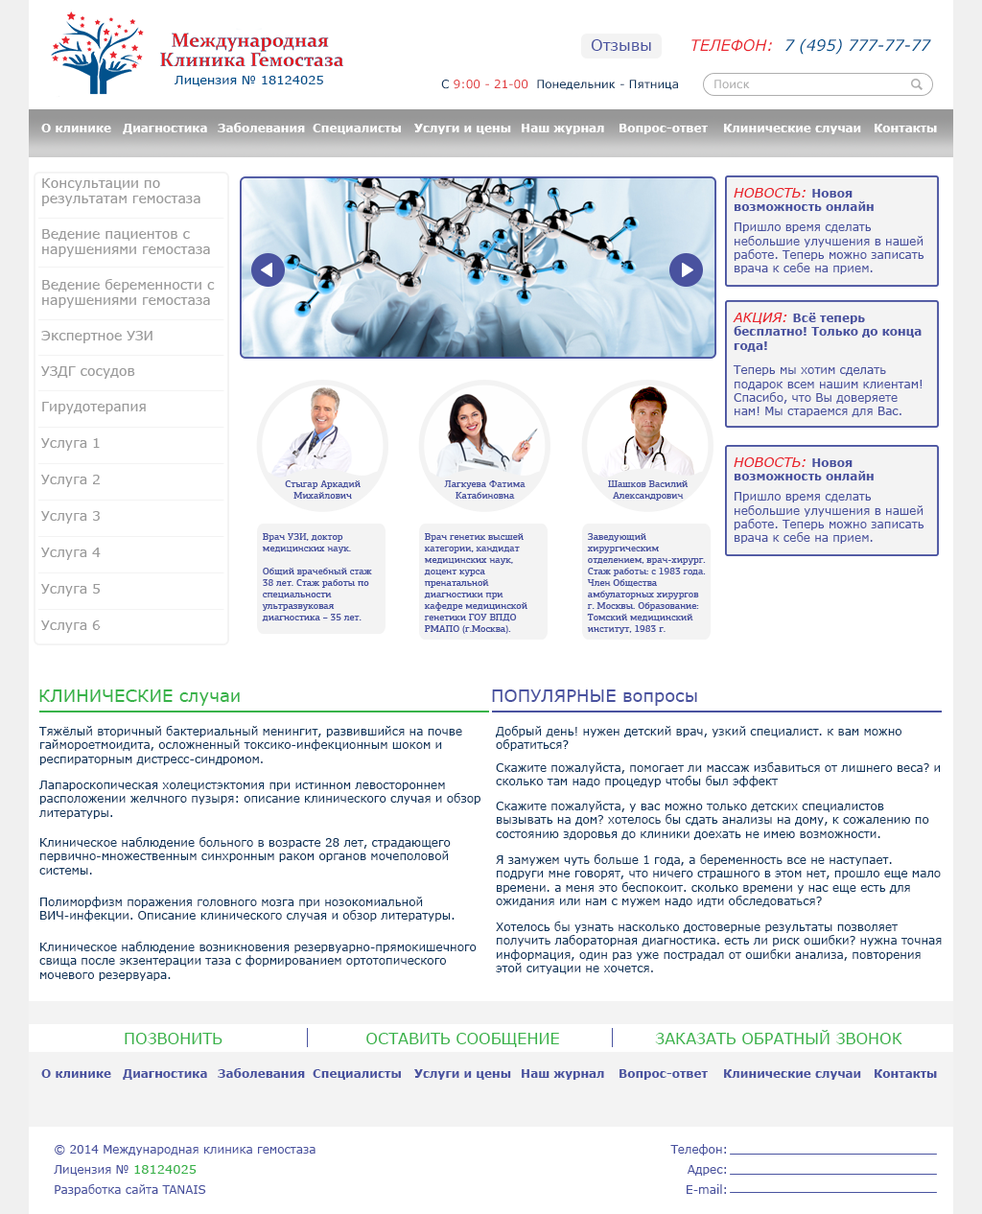
<style>
.page{position:relative;width:982px;height:1214px;background:#ffffff}
.page>*{position:absolute;margin:0}
.t1{font:15.3px "Verdana";color:#49529f}
.t2{font:15.3px "Verdana-Italic";color:#01518c}
.t3{font:15.3px "Verdana-Italic";color:#e9232c;text-transform:uppercase}
.t4{font:12.5px "Verdana";color:#01518c}
.t5{font:11.5px "Verdana";color:#10365d}
.t6{font:11.5px "Verdana";color:#e13b3e}
.t7{font:11.5px "Verdana";color:#aeaeae}
.t8{font:11.5px "Verdana-Bold";color:#ffffff}
.t9{font:13.4px "Verdana";color:#9a9a9a}
.t10{font:11.5px "Verdana-Bold";color:#49529f}
.t11{font:13.4px "Verdana-Italic";color:#e9232c;text-transform:uppercase}
.t12{font:13.4px "Verdana-Bold";color:#49529f}
.t13{font:11.5px "Verdana";color:#49529f}
.t14{font:9.6px "PFAgoraSlabPro-Medium";color:#4953a0}
.t15{font:17.3px "Verdana";color:#38b349;text-transform:uppercase}
.t16{font:17.3px "Verdana";color:#38b349}
.t17{font:17.3px "Verdana";color:#49529f;text-transform:uppercase}
.t18{font:17.3px "Verdana";color:#49529f}
.t19{font:15.3px "Verdana";color:#38b349;text-transform:uppercase}
.t20{font:11.5px/20.1px "Verdana";color:#49529f}
.t21{font:12.5px "Verdana";color:#38b349}
</style>
<div class="page">
<p class="t1" style="left:591px;top:39px;width:60px;height:12px">Отзывы</p>
<p class="t2" style="left:691px;top:38px;width:240px;height:17px"><span class="t3">Телефон: </span> 7 (495) 777-77-77</p>
<p class="t4" style="left:175px;top:76px;width:148px;height:10px">Лицензия № 18124025</p>
<p class="t5" style="left:441px;top:80px;width:237px;height:10px">C <span class="t6">9:00 - 21-00  </span>Понедельник - Пятница</p>
<p class="t7" style="left:715px;top:80px;width:35px;height:9px">Поиск</p>
<p class="t8" style="left:41px;top:124px;width:70px;height:8px">О клинике</p>
<p class="t8" style="left:123px;top:124px;width:84px;height:10px">Диагностика</p>
<p class="t8" style="left:218px;top:123px;width:87px;height:9px">Заболевания</p>
<p class="t8" style="left:313px;top:124px;width:88px;height:10px">Специалисты</p>
<p class="t8" style="left:414px;top:124px;width:97px;height:10px">Услуги и цены</p>
<p class="t8" style="left:522px;top:124px;width:82px;height:10px">Наш журнал</p>
<p class="t8" style="left:620px;top:124px;width:88px;height:10px">Вопрос-ответ</p>
<p class="t8" style="left:724px;top:124px;width:137px;height:10px">Клинические случаи</p>
<p class="t8" style="left:875px;top:124px;width:62px;height:8px">Контакты</p>
<p class="t9" style="left:42px;top:178px;width:158px;height:28px">Консультации по <br>результатам гемостаза</p>
<p class="t10" style="left:734px;top:188px;width:140px;height:23px"><span class="t11">Новость: </span>Новоя возможность онлайн <span class="t12">записи на прием</span></p>
<p class="t9" style="left:42px;top:229px;width:168px;height:28px">Ведение пациентов с <br>нарушениями гемостаза</p>
<p class="t13" style="left:734px;top:223px;width:191px;height:51px">Пришло время сделать небольшие улучшения в нашей работе. Теперь можно записать врача к себе на прием.</p>
<p class="t9" style="left:42px;top:279px;width:173px;height:29px">Ведение беременности с <br>нарушениями гемостаза</p>
<p class="t10" style="left:733px;top:313px;width:189px;height:39px"><span class="t11">Акция: </span>Всё теперь бесплатно! Только до конца года!</p>
<p class="t9" style="left:41px;top:331px;width:111px;height:12px">Экспертное УЗИ</p>
<p class="t13" style="left:733px;top:365px;width:190px;height:52px">Теперь мы хотим сделать подарок всем нашим клиентам! Спасибо, что Вы доверяете нам! Мы стараемся для Вас.</p>
<p class="t9" style="left:41px;top:366px;width:94px;height:13px">УЗДГ сосудов</p>
<p class="t9" style="left:42px;top:402px;width:104px;height:12px">Гирудотерапия</p>
<p class="t9" style="left:41px;top:438px;width:59px;height:13px">Услуга 1</p>
<p class="t10" style="left:734px;top:457px;width:140px;height:23px"><span class="t11">Новость: </span>Новоя возможность онлайн <span class="t12">записи на прием</span></p>
<p class="t9" style="left:41px;top:475px;width:60px;height:12px">Услуга 2</p>
<p class="t14" style="left:285px;top:480px;width:76px;height:19px;text-align:center">Стыгар Аркадий Михайлович</p>
<p class="t14" style="left:444px;top:480px;width:82px;height:19px;text-align:center">Лагкуева Фатима Катабиновна</p>
<p class="t14" style="left:608px;top:480px;width:81px;height:21px;text-align:center">Шашков Василий Александрович</p>
<p class="t13" style="left:734px;top:492px;width:191px;height:52px">Пришло время сделать небольшие улучшения в нашей работе. Теперь можно записать врача к себе на прием.</p>
<p class="t9" style="left:41px;top:511px;width:59px;height:13px">Услуга 3</p>
<p class="t14" style="left:262px;top:533px;width:110px;height:88px">Врач УЗИ, доктор медицинских наук.<br><br>Общий врачебный стаж 38 лет. Стаж работы по специальности ультразвуковая диагностика – 35 лет.</p>
<p class="t14" style="left:424px;top:533px;width:103px;height:101px">Врач генетик высшей категории, кандидат медицинских наук, доцент курса пренатальной диагностики при кафедре медицинской генетики ГОУ ВПДО РМАПО (г.Москва). специалист по медико-генетическому консультированию семей. вопросам генетически обусловленных форм бесплодия, невынашивания беременности, врожденной и наследственной патологии.</p>
<p class="t14" style="left:587px;top:533px;width:119px;height:101px">Заведующий хирургическим отделением, врач-хирург. Стаж работы: с 1983 года. Член Общества амбулаторных хирургов г. Москвы. Образование: Томский медицинский институт, 1983 г.</p>
<p class="t9" style="left:41px;top:548px;width:60px;height:12px">Услуга 4</p>
<p class="t9" style="left:41px;top:584px;width:59px;height:13px">Услуга 5</p>
<p class="t9" style="left:41px;top:621px;width:60px;height:12px">Услуга 6</p>
<p class="t15" style="left:39px;top:690px;width:201px;height:16px">Клинические <span class="t16">случаи</span></p>
<p class="t17" style="left:492px;top:690px;width:205px;height:16px">Популярные<span class="t18"> вопросы</span></p>
<p class="t5" style="left:38px;top:726px;width:424px;height:39px">Тяжёлый вторичный бактериальный менингит, развившийся на почве гаймороетмоидита, осложненный токсико-инфекционным шоком и респираторным дистресс-синдромом.</p>
<p class="t5" style="left:496px;top:726px;width:406px;height:25px">Добрый день! нужен детский врач, узкий специалист. к вам можно обратиться?</p>
<p class="t5" style="left:496px;top:762px;width:445px;height:25px">Скажите пожалуйста, помогает ли массаж избавиться от лишнего веса? и сколько там надо процедур чтобы был эффект</p>
<p class="t5" style="left:39px;top:781px;width:441px;height:38px">Лапароскопическая холецистэктомия при истинном левостороннем расположении желчного пузыря: описание клинического случая и обзор литературы.</p>
<p class="t5" style="left:496px;top:801px;width:433px;height:39px">Скажите пожалуйста, у вас можно только детских специалистов вызывать на дом? хотелось бы сдать анализы на дому, к сожалению по состоянию здоровья до клиники доехать не имею возможности.</p>
<p class="t5" style="left:39px;top:837px;width:412px;height:38px">Клиническое наблюдение больного в возрасте 28 лет, cтрадающего первично-множественным синхронным раком органов мочеполовой системы.</p>
<p class="t5" style="left:496px;top:855px;width:445px;height:52px">Я замужем чуть больше 1 года, а беременность все не наступает. подруги мне говорят, что ничего страшного в этом нет, прошло еще мало времени. а меня это беспокоит. сколько времени у нас еще есть для ожидания или нам с мужем надо идти обследоваться?</p>
<p class="t5" style="left:40px;top:897px;width:415px;height:25px">Полиморфизм поражения головного мозга при нозокомиальной ВИЧ-инфекции. Описание клинического случая и обзор литературы.</p>
<p class="t5" style="left:496px;top:922px;width:446px;height:52px">Xотелось бы узнать насколько достоверные результаты позволяет получить лабораторная диагностика. есть ли риск ошибки? нужна точная информация, один раз уже пострадал от ошибки анализа, повторения этой ситуации не хочется.</p>
<p class="t5" style="left:39px;top:942px;width:438px;height:39px">Клиническое наблюдение возникновения резервуарно-прямокишечного свища после экзентерации таза с формированием ортотопического мочевого резервуара.</p>
<p class="t19" style="left:125px;top:1033px;width:98px;height:11px">Позвонить</p>
<p class="t19" style="left:366px;top:1033px;width:193px;height:14px">Оставить сообщение</p>
<p class="t19" style="left:655px;top:1030px;width:247px;height:14px">Заказать обратный звонок</p>
<p class="t10" style="left:41px;top:1069px;width:70px;height:9px">О клинике</p>
<p class="t10" style="left:123px;top:1069px;width:84px;height:11px">Диагностика</p>
<p class="t10" style="left:218px;top:1068px;width:87px;height:10px">Заболевания</p>
<p class="t10" style="left:313px;top:1069px;width:88px;height:11px">Специалисты</p>
<p class="t10" style="left:414px;top:1069px;width:97px;height:11px">Услуги и цены</p>
<p class="t10" style="left:522px;top:1069px;width:82px;height:11px">Наш журнал</p>
<p class="t10" style="left:620px;top:1069px;width:88px;height:11px">Вопрос-ответ</p>
<p class="t10" style="left:724px;top:1069px;width:137px;height:11px">Клинические случаи</p>
<p class="t10" style="left:875px;top:1069px;width:62px;height:9px">Контакты</p>
<p class="t20" style="left:54px;top:1145px;width:262px;height:51px">© 2014 Международная клиника гемостаза<br>Лицензия № <span class="t21">18124025<br></span>Разработка сайта TANAIS</p>
<p class="t20" style="left:670px;top:1144px;width:56px;height:50px;text-align:right">Телефон:<br>Адрес: <br>E-mail:</p>
</div>
